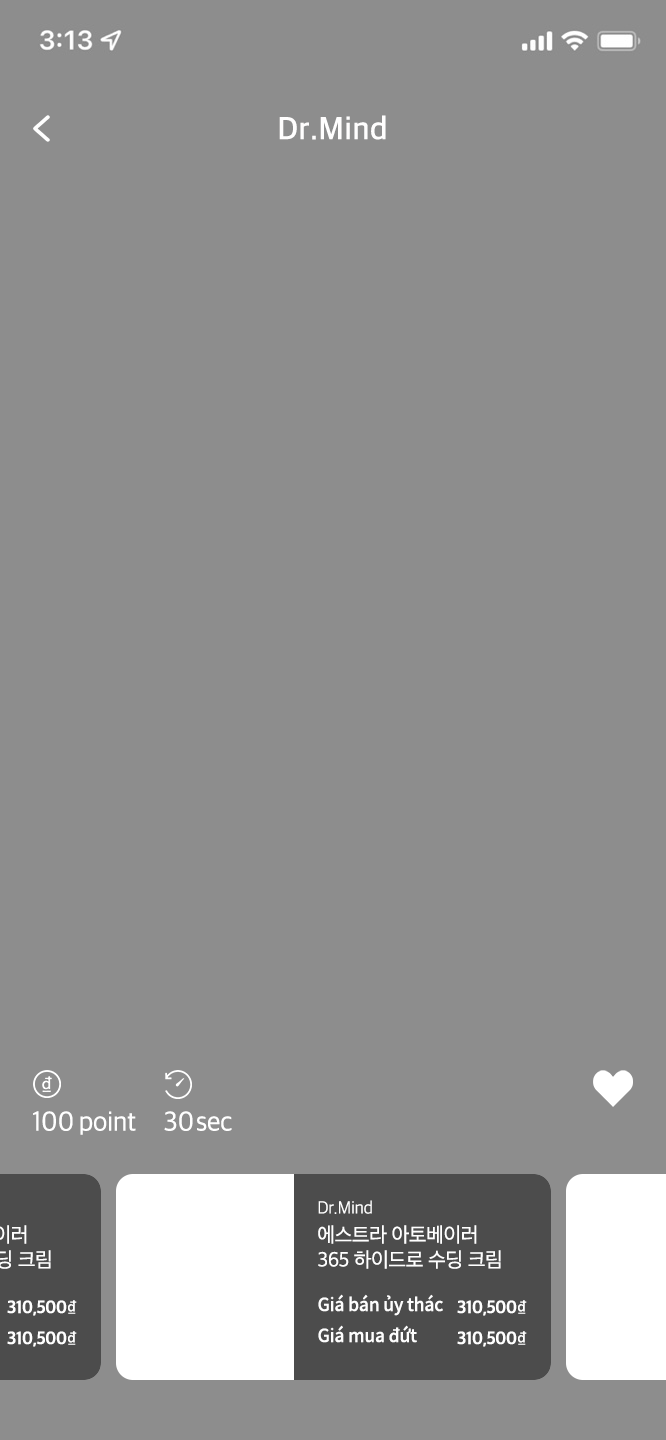
<style>
.page{position:relative;width:666px;height:1440px;background:#8d8d8d}
.page>*{position:absolute;margin:0}
.t1{font:32px "AppleSDGothicNeo-SemiBold";letter-spacing:0.02em;color:#fffefe;scale:0.97 1}
.t2{font:28px "AppleSDGothicNeo-Regular";letter-spacing:-0.01em;color:#ffffff;scale:0.96 1}
.t3{font:28px "AppleSDGothicNeo-Regular";letter-spacing:-0.1em;color:#ffffff;scale:0.96 1}
.t4{font:21px/25px "AppleSDGothicNeo-Regular";letter-spacing:-0.015em;color:#ffffff;scale:0.97 1}
.t5{font:18px/28px "AppleSDGothicNeo-Light";letter-spacing:-0.01em;color:#ffffff;scale:0.97 1}
.t6{font:18px/28px "AppleSDGothicNeo-Light";letter-spacing:-0.01em;color:#ffffff;text-transform:uppercase;scale:0.97 1}
.t7{font:21px/28px "AppleSDGothicNeo-Regular";letter-spacing:-0.015em;color:#ffffff;scale:0.97 1}
.t8{font:18px/31px "AppleSDGothicNeo-Bold";letter-spacing:-0.022em;color:#ffffff;scale:0.96 1}
.t9{font:18px/31px "NotoSansCJKkr-Regular";letter-spacing:-0.022em;color:#ffffff;scale:0.96 1}
.t10{font:18px/31px "NotoSansCJKkr-Medium";letter-spacing:-0.01em;color:#fefefe;scale:0.97 1}
</style>
<div class="page">
<p class="t1" style="left:279px;top:115px;width:107px;height:25px">Dr.Mind</p>
<p class="t2" style="left:33px;top:1111px;width:103px;height:24px">100 point</p>
<p class="t2" style="left:164px;top:1111px;width:68px;height:20px">3<span class="t3">0 </span>sec</p>
<p class="t4" style="left:318px;top:1200px;width:183px;height:69px"><span class="t5">Dr.</span><span class="t6">m</span><span class="t5">ind<br></span><span class="t7">에스트라 아토베이러<br></span>365 하이드로 수딩 크림</p>
<p class="t8" style="left:7px;top:1300px;width:70px;height:47px;text-align:right">310,500<span class="t9">₫<br></span>310,500<span class="t9">₫</span></p>
<p class="t10" style="left:318px;top:1294px;width:125px;height:49px">Giá bán ủy thác<br>Giá mua đứt</p>
<p class="t8" style="left:457px;top:1300px;width:70px;height:47px;text-align:right">310,500<span class="t9">₫<br></span>310,500<span class="t9">₫</span></p>
</div>
